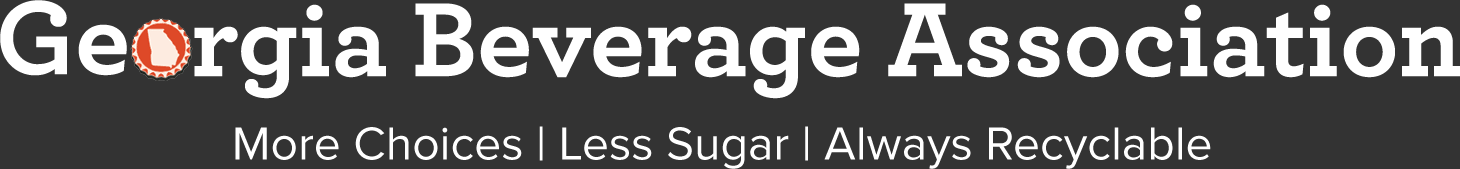
<style>
.page{position:relative;width:1460px;height:169px;background:#333333}
.page>*{position:absolute;margin:0}
.t1{font:110px "Archer-Bold";color:#ffffff}
.t2{font:48px "ProximaNova-Regular";color:#ffffff}
</style>
<div class="page">
<p class="t1" style="left:0px;top:0px;width:127px;height:76px">Ge</p>
<p class="t1" style="left:194px;top:3px;width:1266px;height:96px">rgia Beverage Association</p>
<p class="t2" style="left:235px;top:126px;width:976px;height:43px">More Choices | Less Sugar | Always Recyclable</p>
</div>
